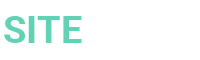
<style>
.page{position:relative;width:200px;height:60px;background:#ffffff}
.page>*{position:absolute;margin:0}
.t1{font:38px "Roboto-Bold";color:#61d2b4}
</style>
<div class="page">
<p class="t1" style="left:4px;top:16px;width:78px;height:27px">SITE</p>
</div>
